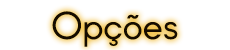
<style>
.page{position:relative;width:230px;height:50px;background:#ffffff}
.page>*{position:absolute;margin:0}
.t1{font:38px "Arcon-Regular";color:#160c00}
</style>
<div class="page">
<p class="t1" style="left:52px;top:11px;width:126px;height:36px">Opções</p>
</div>
